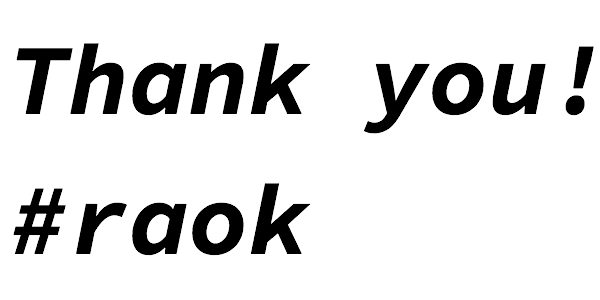
<style>
.page{position:relative;width:600px;height:300px;background:#ffffff}
.page>*{position:absolute;margin:0}
.t1{font:100px "SourceCodePro-BoldIt";color:#000000}
</style>
<div class="page">
<p class="t1" style="left:16px;top:43px;width:578px;height:91px">Thank you!</p>
<p class="t1" style="left:13px;top:183px;width:298px;height:73px">#raok</p>
</div>
